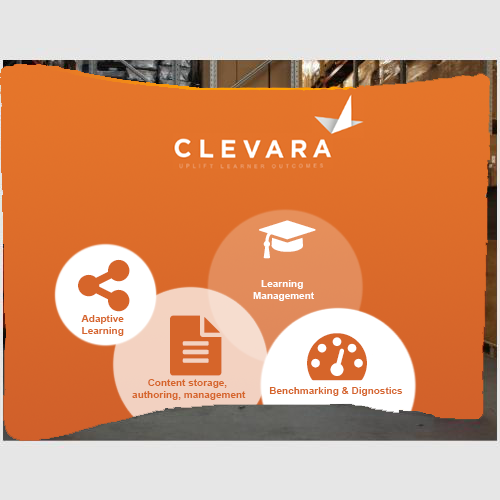
<style>
.page{position:relative;width:500px;height:500px;background:#e6e6e6}
.page>*{position:absolute;margin:0}
.t1{font:10px "Arial-BoldMT";color:#ffffff}
.t2{font:10px "Arial-BoldMT";color:#d6652a}
</style>
<div class="page">
<p class="t1" style="left:253px;top:280px;width:61px;height:21px;text-align:center">Learning <br>Management</p>
<p class="t2" style="left:81px;top:315px;width:43px;height:21px">Adaptive <br>Learning</p>
<p class="t2" style="left:132px;top:379px;width:114px;height:21px;text-align:center">Content storage, <br>authoring, management</p>
<p class="t2" style="left:269px;top:387px;width:134px;height:9px">Benchmarking &amp; Dignostics</p>
</div>
